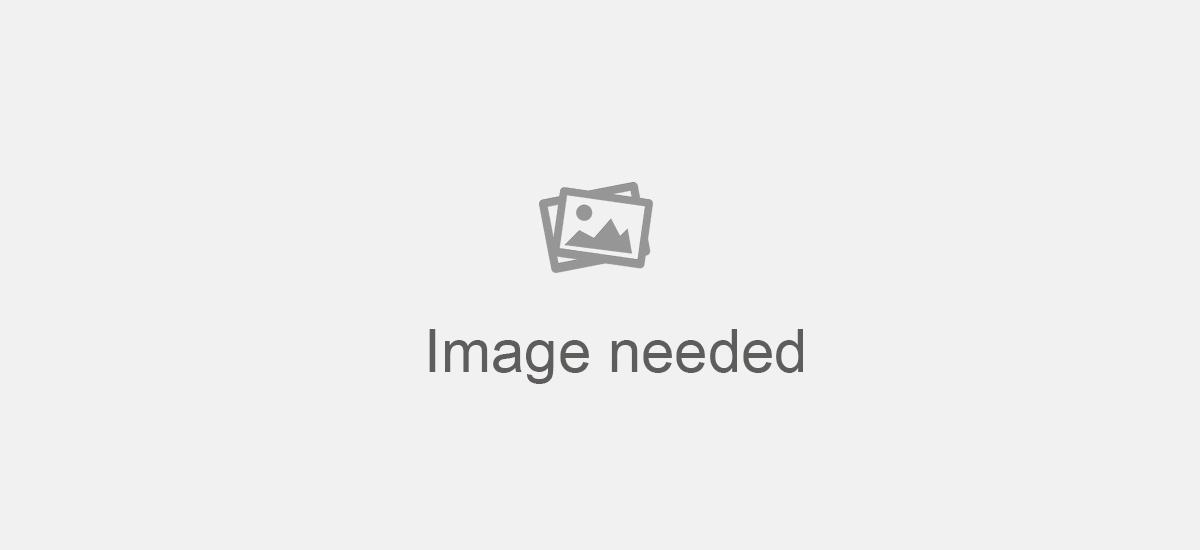
<style>
.page{position:relative;width:1200px;height:550px;background:#f1f1f1}
.page>*{position:absolute;margin:0}
.t1{font:60px "ArialMT";color:#5f5c5c}
</style>
<div class="page">
<p class="t1" style="left:429px;top:329px;width:374px;height:55px">Image needed</p>
</div>
